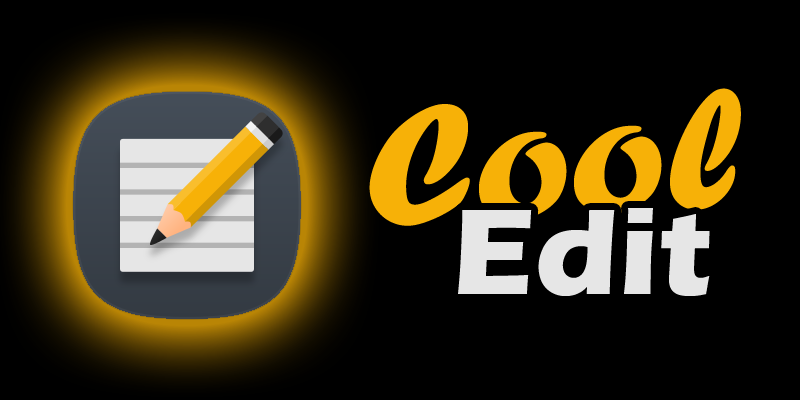
<style>
.page{position:relative;width:800px;height:400px;background:#000000}
.page>*{position:absolute;margin:0}
.t1{font:176.8px "ForteMT";color:#f7b107}
.t2{font:126.4px "ErasITC-Bold";color:#e6e6e6}
</style>
<div class="page">
<p class="t1" style="left:369px;top:88px;width:372px;height:138px;rotate:-3deg">Cool</p>
<p class="t2" style="left:458px;top:208px;width:252px;height:88px">Edit</p>
</div>
